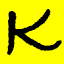
<style>
.page{position:relative;width:64px;height:64px;background:#ffff00}
.page>*{position:absolute;margin:0}
.t1{font:79px "BradleyHandITCTT-Bold";color:#000000}
</style>
<div class="page">
<p class="t1" style="left:7px;top:9px;width:55px;height:46px">K</p>
</div>
